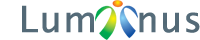
<style>
.page{position:relative;width:200px;height:40px;background:#ffffff}
.page>*{position:absolute;margin:0}
.t1{font:36px "LucidaSansUnicode";letter-spacing:0.01em;color:#607988;font-weight:bold}
</style>
<div class="page">
<p class="t1" style="left:22px;top:5px;width:178px;height:28px">Lum   nus</p>
</div>
